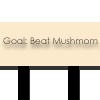
<style>
.page{position:relative;width:100px;height:100px;background:#ffffff}
.page>*{position:absolute;margin:0}
.t1{font:9px "CenturyGothic"}
</style>
<div class="page">
<p class="t1" style="left:3px;top:37px;width:95px;height:7px">Goal: Beat Mushmom</p>
</div>
